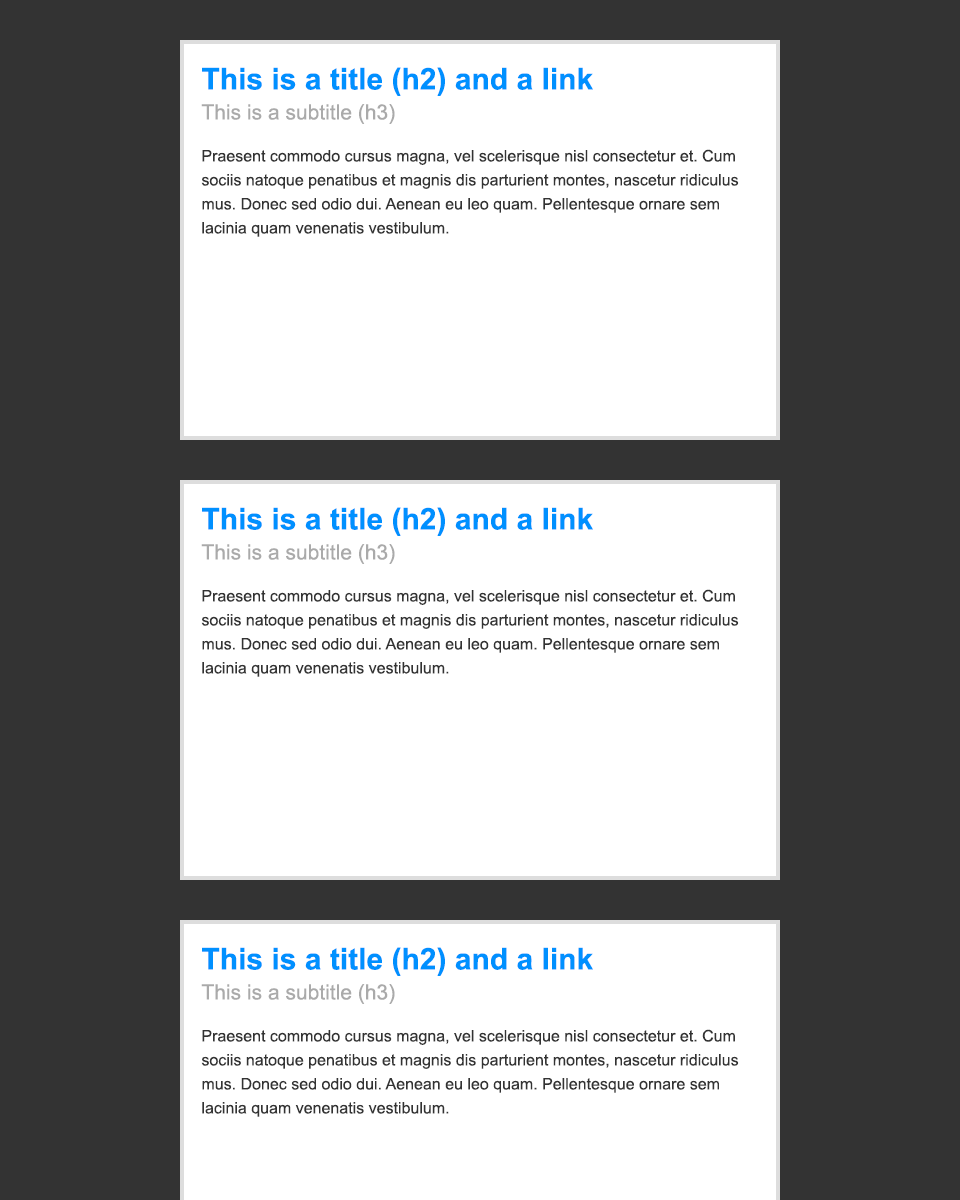
<style>
.page{position:relative;width:960px;height:1200px;background:#ffffff}
.page>*{position:absolute;margin:0}
.t1{font:30px "Arial-BoldMT";color:#0090ff}
.t2{font:21px "ArialMT";color:#aaaaaa}
.t3{font:16px/24px "ArialMT";color:#333333}
</style>
<div class="page">
<p class="t1" style="left:202px;top:67px;width:391px;height:29px">This is a title (h2) and a link</p>
<p class="t2" style="left:201px;top:104px;width:194px;height:20px">This is a subtitle (h3)</p>
<p class="t3" style="left:201px;top:149px;width:538px;height:88px">Praesent commodo cursus magna, vel scelerisque nisl consectetur et. Cum sociis natoque penatibus et magnis dis parturient montes, nascetur ridiculus mus. Donec sed odio dui. Aenean eu leo quam. Pellentesque ornare sem lacinia quam venenatis vestibulum.</p>
<p class="t1" style="left:202px;top:507px;width:391px;height:29px">This is a title (h2) and a link</p>
<p class="t2" style="left:201px;top:544px;width:194px;height:20px">This is a subtitle (h3)</p>
<p class="t3" style="left:201px;top:589px;width:538px;height:88px">Praesent commodo cursus magna, vel scelerisque nisl consectetur et. Cum sociis natoque penatibus et magnis dis parturient montes, nascetur ridiculus mus. Donec sed odio dui. Aenean eu leo quam. Pellentesque ornare sem lacinia quam venenatis vestibulum.</p>
<p class="t1" style="left:202px;top:947px;width:391px;height:29px">This is a title (h2) and a link</p>
<p class="t2" style="left:201px;top:984px;width:194px;height:20px">This is a subtitle (h3)</p>
<p class="t3" style="left:201px;top:1029px;width:538px;height:88px">Praesent commodo cursus magna, vel scelerisque nisl consectetur et. Cum sociis natoque penatibus et magnis dis parturient montes, nascetur ridiculus mus. Donec sed odio dui. Aenean eu leo quam. Pellentesque ornare sem lacinia quam venenatis vestibulum.</p>
</div>
